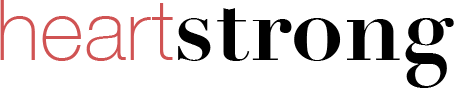
<style>
.page{position:relative;width:454px;height:88px;background:#ffffff}
.page>*{position:absolute;margin:0}
.t1{font:94px "Didot-Bold";color:#000000}
.t2{font:84px "HelveticaNeue-Thin";color:#d05353}
</style>
<div class="page">
<p class="t1" style="left:0px;top:0px;width:454px;height:88px"><span class="t2">heart</span>strong</p>
</div>
